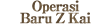
<style>
.page{position:relative;width:111px;height:26px;background:#ffffff}
.page>*{position:absolute;margin:0}
.t1{font:14px/12px "RyuminPro-ExBold";letter-spacing:-0.08em;color:#6a563e;font-weight:bold}
</style>
<div class="page">
<p class="t1" style="left:20px;top:0px;width:71px;height:24px;text-align:center">Operasi<br>Baru Z Kai</p>
</div>
